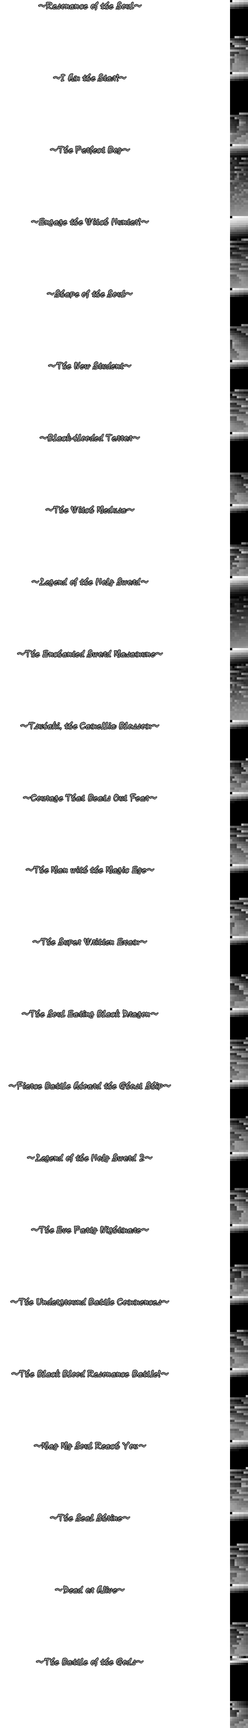
<style>
.page{position:relative;width:248px;height:1728px;background:#ffffff}
.page>*{position:absolute;margin:0}
.t1{font:9px/72px "SamuraiStd-R";letter-spacing:0.025em;color:#999999;scale:0.9 1}
</style>
<div class="page">
<p class="t1" style="left:9px;top:2px;width:162px;height:1664px;text-align:center">～Resonance of the Soul～<br>～I Am the Star!～<br>～The Perfect Boy～<br>～Engage the Witch Hunter!～<br>～Shape of the Soul～<br>～The New Student～<br>～Black-blooded Terror～<br>～The Witch Medusa～<br>～Legend of the Holy Sword～<br>～The Enchanted Sword Masamune～<br>～Tsubaki, the Camellia Blossom～<br>～Courage That Beats Out Fear～<br>～The Man with the Magic Eye～<br>～The Super Written Exam～<br>～The Soul Eating Black Dragon～<br>～Fierce Battle Aboard the Ghost Ship～<br>～Legend of the Holy Sword 2～<br>～The Eve Party Nightmare～<br>～The Underground Battle Commences～<br>～The Black Blood Resonance Battle!～<br>～May My Soul Reach You～<br>～The Seal Shrine～<br>～Dead or Alive～<br>～The Battle of the Gods～</p>
</div>
